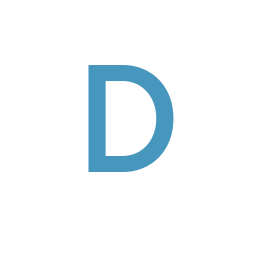
<style>
.page{position:relative;width:256px;height:256px;background:#ffffff}
.page>*{position:absolute;margin:0}
.t1{font:150px "AbletonSansSmall-Regular";color:#4696bd}
</style>
<div class="page">
<p class="t1" style="left:88px;top:65px;width:86px;height:107px">D</p>
</div>
